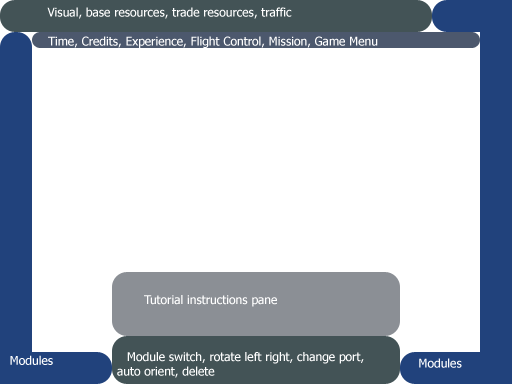
<style>
.page{position:relative;width:512px;height:384px;background:#ffffff}
.page>*{position:absolute;margin:0}
.t1{font:12px "Tahoma";color:#ffffff}
</style>
<div class="page">
<p class="t1" style="left:47px;top:7px;width:245px;height:12px">Visual, base resources, trade resources, traffic</p>
<p class="t1" style="left:48px;top:36px;width:330px;height:12px">Time, Credits, Experience, Flight Control, Mission, Game Menu</p>
<p class="t1" style="left:144px;top:295px;width:133px;height:12px">Tutorial instructions pane</p>
<p class="t1" style="left:117px;top:352px;width:247px;height:26px">Module switch, rotate left right, change port,<br>auto orient, delete</p>
<p class="t1" style="left:10px;top:355px;width:43px;height:10px">Modules</p>
<p class="t1" style="left:419px;top:358px;width:43px;height:10px">Modules</p>
</div>
